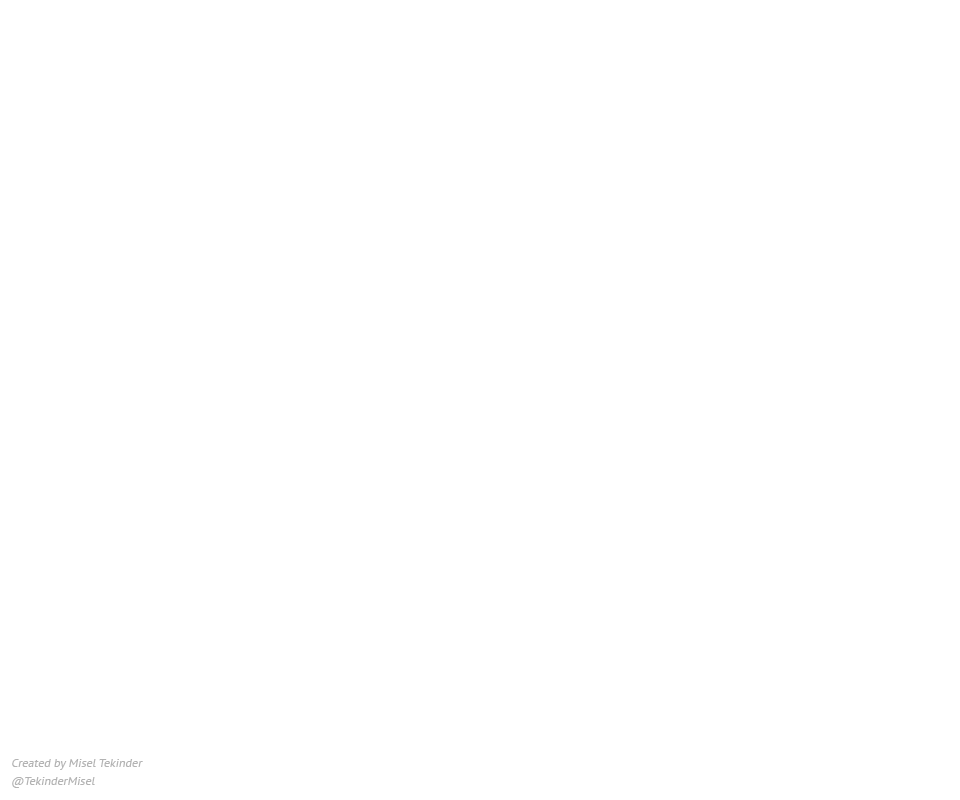
<style>
.page{position:relative;width:960px;height:800px;background:#ffffff}
.page>*{position:absolute;margin:0}
.t1{font:12px/18px "PTSans-Regular";color:#b3b3b3;font-style:italic}
</style>
<div class="page">
<p class="t1" style="left:12px;top:759px;width:131px;height:29px">Created by Misel Tekinder<br>@TekinderMisel</p>
</div>
